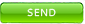
<style>
.page{position:relative;width:85px;height:24px}
.page>*{position:absolute;margin:0}
.t1{font:10.2px "Cantarell-Regular";color:#fdfdfd}
</style>
<div class="page">
<p class="t1" style="left:27px;top:8px;width:29px;height:9px">SEND</p>
</div>
